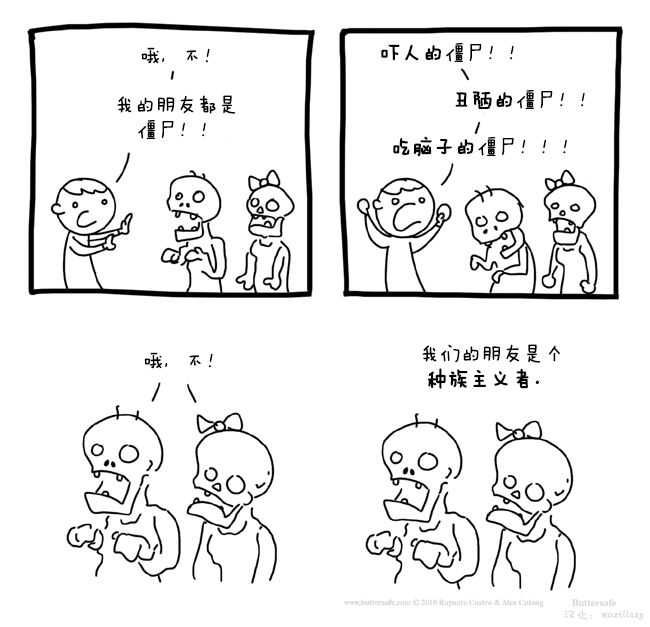
<style>
.page{position:relative;width:650px;height:627px;background:#ffffff}
.page>*{position:absolute;margin:0}
.t1{font:20.8px "FZMWJW--GB1-0";color:#000000}
.t2{font:20.8px "FZMWJW--GB1-0";color:#000000;font-weight:bold}
.t3{font:20.8px/25px "FZMWJW--GB1-0";color:#000000}
.t4{font:20.8px/25px "FZMWJW--GB1-0";color:#000000;font-weight:bold}
.t5{font:12.5px "FZMWJW--GB1-0";color:#d9d9d9}
</style>
<div class="page">
<p class="t1" style="left:141px;top:47px;width:69px;height:17px">哦，不！</p>
<p class="t1" style="left:381px;top:43px;width:133px;height:19px"><span class="t2">吓人的</span>僵尸！！</p>
<p class="t3" style="left:117px;top:95px;width:118px;height:44px">我的朋友都是<br>   僵尸！！</p>
<p class="t1" style="left:455px;top:90px;width:130px;height:19px"><span class="t2">丑陋的</span>僵尸！！</p>
<p class="t1" style="left:393px;top:136px;width:174px;height:21px"><span class="t2">吃脑子的</span>僵尸！！！</p>
<p class="t1" style="left:144px;top:352px;width:69px;height:17px">哦，不！</p>
<p class="t3" style="left:422px;top:344px;width:138px;height:45px">我们的朋友是个<br> <span class="t4">种族主义者</span>。</p>
<p class="t5" style="left:564px;top:609px;width:80px;height:11px">汉化：mozillazg</p>
</div>
